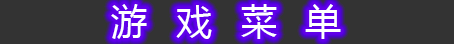
<style>
.page{position:relative;width:454px;height:44px;background:#333333}
.page>*{position:absolute;margin:0}
.t1{font:36px "MicrosoftYaHei";letter-spacing:0.8em;color:#ffffff}
</style>
<div class="page">
<p class="t1" style="left:111px;top:4px;width:230px;height:35px">游戏菜单</p>
</div>
